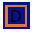
<style>
.page{position:relative;width:32px;height:32px;background:#001388}
.page>*{position:absolute;margin:0}
.t1{font:17px "MyriadPro-Regular";color:#000000}
</style>
<div class="page">
<p class="t1" style="left:11px;top:10px;width:10px;height:12px">D</p>
</div>
